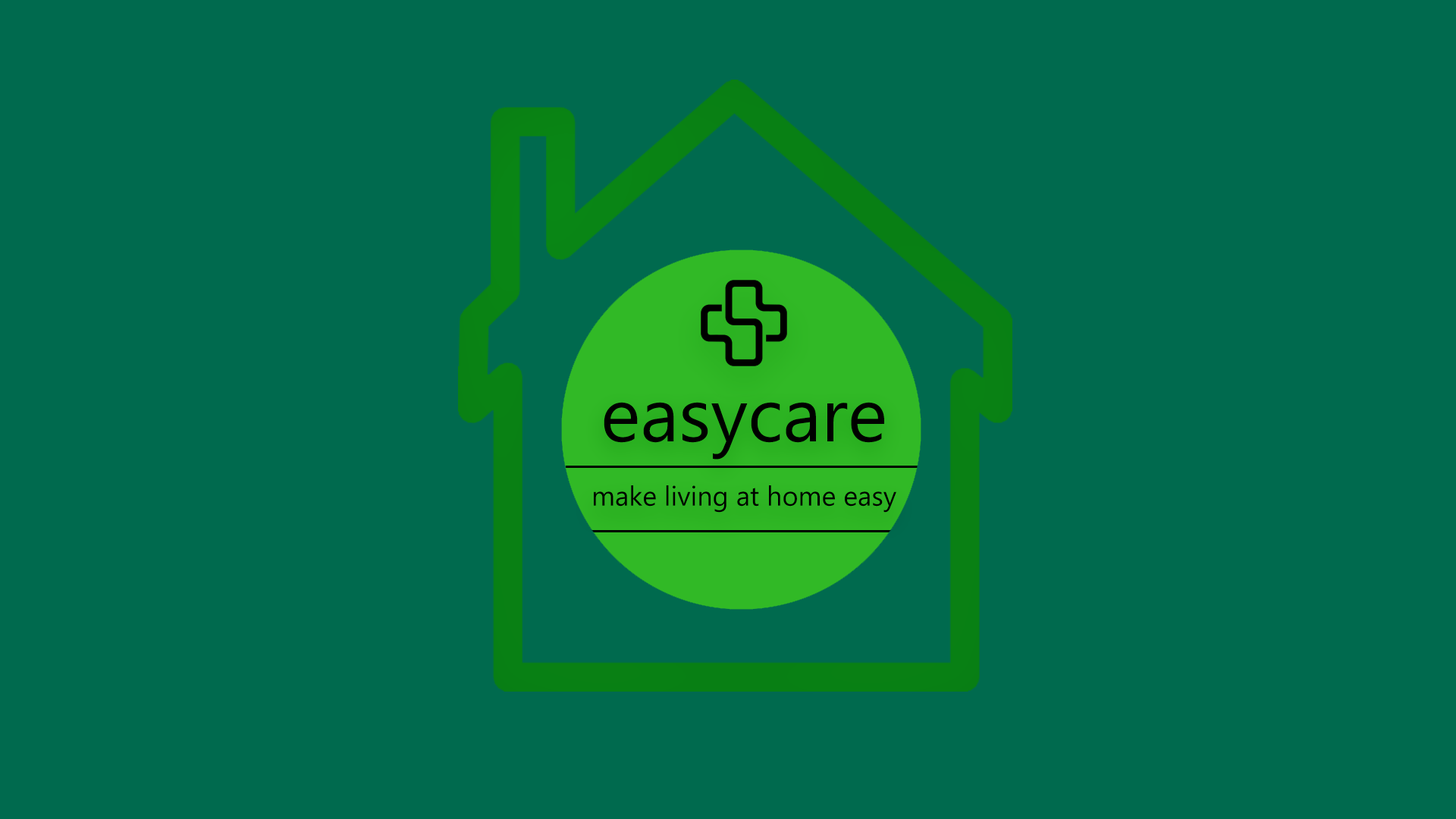
<style>
.page{position:relative;width:1456px;height:819px;background:#006a4e}
.page>*{position:absolute;margin:0}
.t1{font:75.8px "MicrosoftPhagsPa";color:#000000}
.t2{font:27.3px "MicrosoftPhagsPa";color:#000000}
</style>
<div class="page">
<p class="t1" style="left:604px;top:402px;width:280px;height:58px">easycare</p>
<p class="t2" style="left:594px;top:485px;width:302px;height:28px">make living at home easy</p>
</div>
